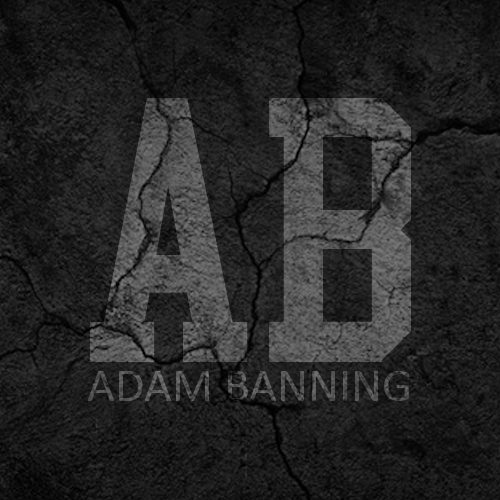
<style>
.page{position:relative;width:500px;height:500px}
.page>*{position:absolute;margin:0}
.t1{font:48px "Calibri";color:#515151}
</style>
<div class="page">
<p class="t1" style="left:87px;top:371px;width:322px;height:30px">ADAM BANNING</p>
</div>
